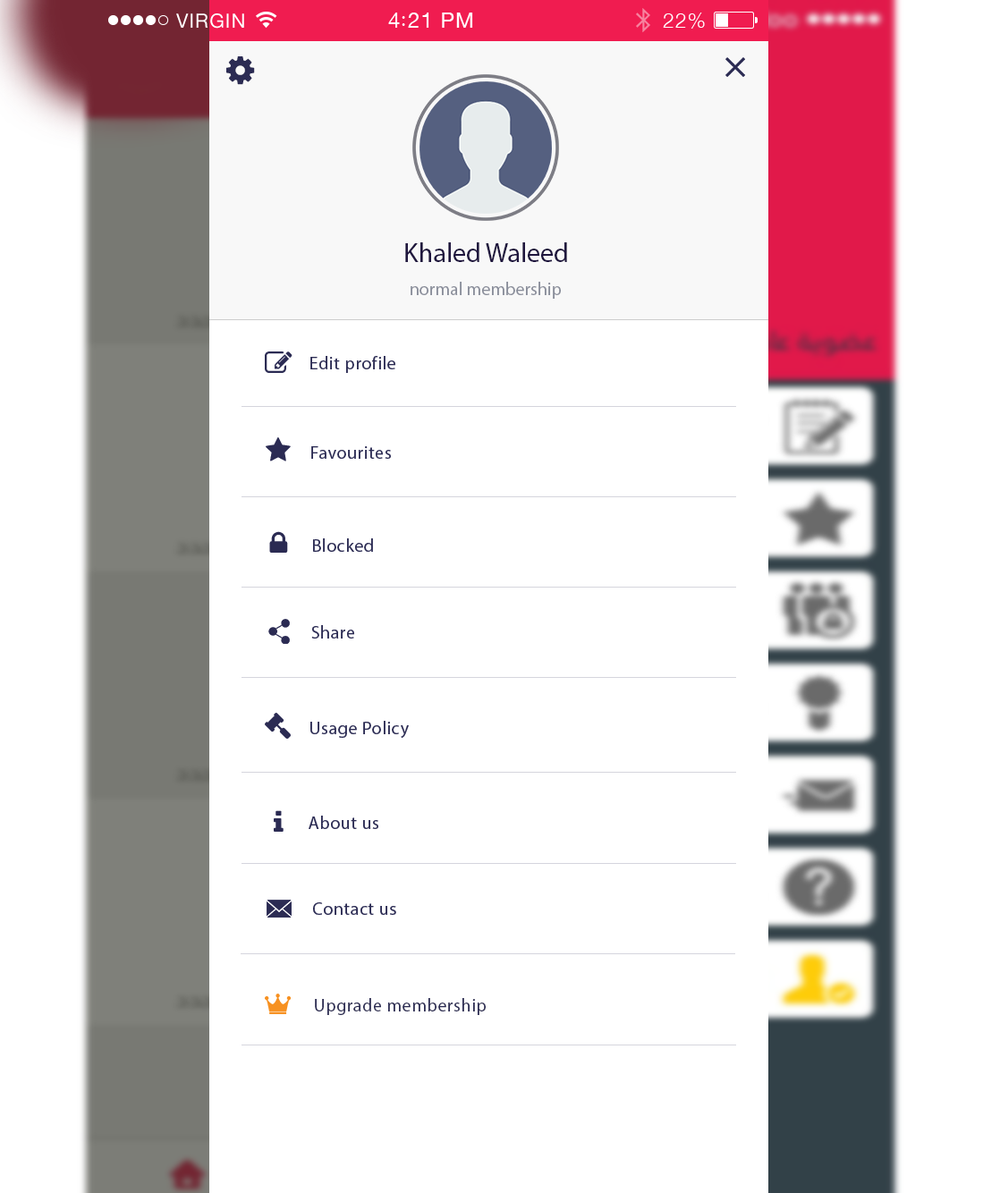
<style>
.page{position:relative;width:1000px;height:1193px;background:#ffffff}
.page>*{position:absolute;margin:0}
.t1{font:26.8px "MyriadPro-Regular";color:#1f163e}
.t2{font:17.9px "MyriadPro-Regular";color:#898d9a}
.t3{font:17.9px "MyriadPro-Regular";letter-spacing:0.029em;color:#2b2b53}
</style>
<div class="page">
<p class="t1" style="left:405px;top:242px;width:162px;height:20px">Khaled Waleed</p>
<p class="t2" style="left:410px;top:282px;width:151px;height:17px">normal membership</p>
<p class="t3" style="left:310px;top:356px;width:85px;height:17px">Edit profile</p>
<p class="t3" style="left:311px;top:446px;width:80px;height:13px">Favourites</p>
<p class="t3" style="left:313px;top:538px;width:60px;height:14px">Blocked</p>
<p class="t3" style="left:311px;top:625px;width:43px;height:13px">Share</p>
<p class="t3" style="left:310px;top:721px;width:99px;height:17px">Usage Policy</p>
<p class="t3" style="left:308px;top:815px;width:70px;height:14px">About us</p>
<p class="t3" style="left:313px;top:902px;width:83px;height:13px">Contact us</p>
<p class="t3" style="left:315px;top:998px;width:171px;height:17px">Upgrade membership</p>
</div>
